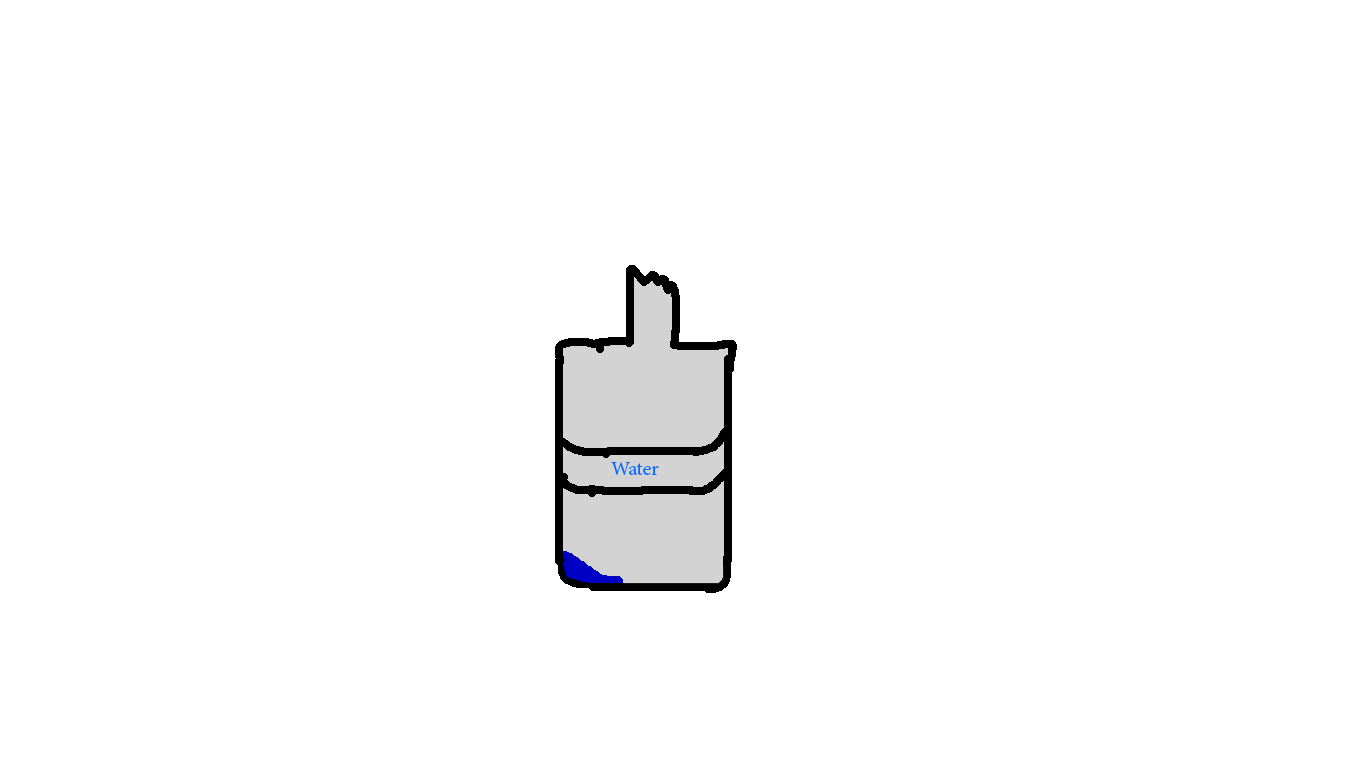
<style>
.page{position:relative;width:1366px;height:768px;background:#ffffff}
.page>*{position:absolute;margin:0}
.t1{font:20px "MinionPro-Regular";color:#006cff}
</style>
<div class="page">
<p class="t1" style="left:611px;top:462px;width:48px;height:13px">Water</p>
</div>
